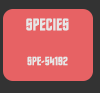
<style>
.page{position:relative;width:100px;height:93px;background:#e76264}
.page>*{position:absolute;margin:0}
.t1{font:12px "Trek-Classic-Credits";color:#e6e6e6;scale:1.04 1}
.t2{font:17px "Trek-Classic-Credits";color:#e6e6e6;scale:1.04 1}
</style>
<div class="page">
<p class="t1" style="left:26px;top:18px;width:43px;height:48px;text-align:center"><span class="t2">SPECIES<br> <br></span>SPE-54192</p>
</div>
